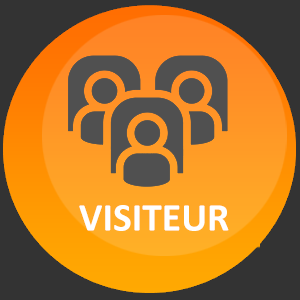
<style>
.page{position:relative;width:300px;height:300px;background:#333333}
.page>*{position:absolute;margin:0}
.t1{font:39.6px "Calibri-Bold";color:#ffffff}
</style>
<div class="page">
<p class="t1" style="left:79px;top:205px;width:150px;height:26px">VISITEUR</p>
</div>
